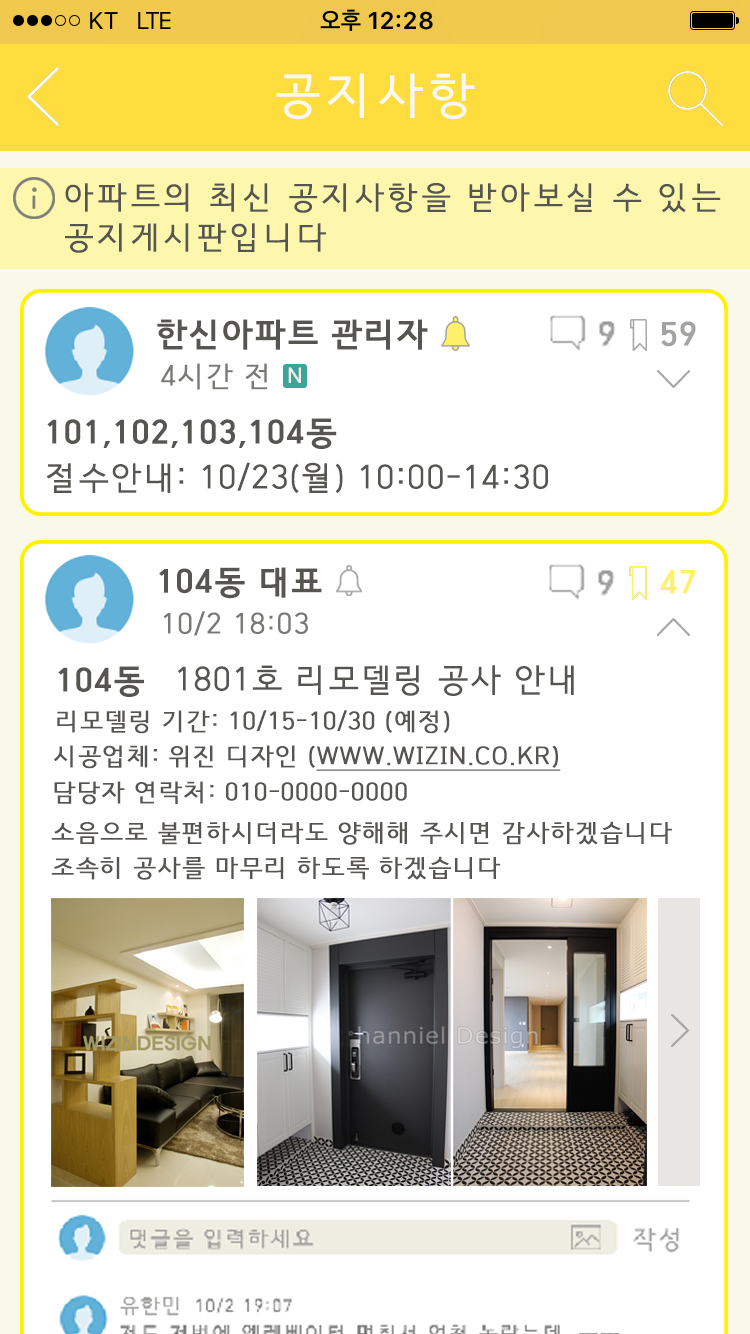
<style>
.page{position:relative;width:750px;height:1334px;background:#ffffff}
.page>*{position:absolute;margin:0}
.t1{font:48px "HCRDotum";letter-spacing:0.075em;color:#f9f8f3;text-transform:uppercase;font-weight:bold}
.t2{font:31px/40px "HCRDotum";letter-spacing:0.075em;color:#565552;text-transform:uppercase;font-weight:bold}
.t3{font:32px "HCRDotum-Bold";letter-spacing:0.025em;color:#565552;text-transform:uppercase;font-weight:bold}
.t4{font:32px "HCRDotum-Bold";letter-spacing:0.025em;color:#a3a3a2;text-transform:uppercase;font-weight:bold}
.t5{font:28px "HCRDotum";letter-spacing:0.025em;color:#797874;text-transform:uppercase;font-weight:bold}
.t6{font:21px "HCRDotum";letter-spacing:0.025em;color:#f1efe7;text-transform:uppercase;font-weight:bold}
.t7{font:32px "HCRDotum";letter-spacing:0.025em;color:#565552;text-transform:uppercase;font-weight:bold}
.t8{font:32px "HCRDotum-Bold";letter-spacing:0.025em;color:#ffef69;text-transform:uppercase;font-weight:bold}
.t9{font:24px "HCRDotum";letter-spacing:0.025em;color:#565552;text-transform:uppercase;font-weight:bold}
.t10{font:24px "HCRDotum";letter-spacing:0.025em;color:#565552;text-transform:uppercase;font-weight:bold;text-decoration:underline}
.t11{font:24px/35px "HCRDotum";letter-spacing:0.025em;color:#565552;text-transform:uppercase;font-weight:bold}
</style>
<div class="page">
<p class="t1" style="left:276px;top:73px;width:199px;height:47px">공지사항</p>
<p class="t2" style="left:65px;top:183px;width:656px;height:70px">아파트의 최신 공지사항을 받아보실 수 있는<br>공지게시판입니다</p>
<p class="t3" style="left:157px;top:319px;width:271px;height:31px">한신아파트 관리자</p>
<p class="t4" style="left:661px;top:321px;width:35px;height:26px">59</p>
<p class="t5" style="left:161px;top:363px;width:107px;height:27px">4시간 전</p>
<p class="t6" style="left:288px;top:367px;width:13px;height:16px">N</p>
<p class="t3" style="left:47px;top:418px;width:290px;height:31px">101,102,103,104동</p>
<p class="t7" style="left:46px;top:462px;width:502px;height:31px">절수안내: 10/23(월) 10:00-14:30</p>
<p class="t3" style="left:159px;top:567px;width:163px;height:32px">104동 대표</p>
<p class="t8" style="left:660px;top:570px;width:35px;height:24px">47</p>
<p class="t5" style="left:163px;top:611px;width:145px;height:25px">10/2 18:03</p>
<p class="t7" style="left:178px;top:665px;width:396px;height:31px">1801호 리모델링 공사 안내</p>
<p class="t3" style="left:58px;top:666px;width:86px;height:31px">104동</p>
<p class="t9" style="left:57px;top:710px;width:393px;height:24px">리모델링 기간: 10/15-10/30 (예정)</p>
<p class="t10" style="left:54px;top:745px;width:507px;height:26px"><span class="t9">시공업체: 위진 디자인 (</span>www.wizin.co.kr)</p>
<p class="t9" style="left:54px;top:781px;width:353px;height:24px">담당자 연락처: 010-0000-0000</p>
<p class="t11" style="left:51px;top:821px;width:621px;height:59px">소음으로 불편하시더라도 양해해 주시면 감사하겠습니다<br>조속히 공사를 마무리 하도록 하겠습니다</p>
</div>
